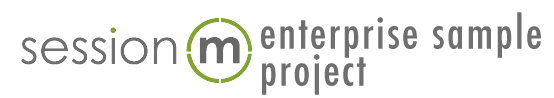
<style>
.page{position:relative;width:554px;height:98px;background:#ffffff}
.page>*{position:absolute;margin:0}
.t1{font:44px "Futura-CondensedMedium";letter-spacing:0.05em;color:#6f6f6f}
</style>
<div class="page">
<p class="t1" style="left:261px;top:12px;width:280px;height:46px">enterprise sample</p>
<p class="t1" style="left:262px;top:54px;width:104px;height:41px">project</p>
</div>
